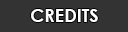
<style>
.page{position:relative;width:128px;height:32px;background:#333333}
.page>*{position:absolute;margin:0}
.t1{font:18px "CenturyGothic-Bold";color:#ffffff}
</style>
<div class="page">
<p class="t1" style="left:31px;top:9px;width:67px;height:13px">CREDITS</p>
</div>
